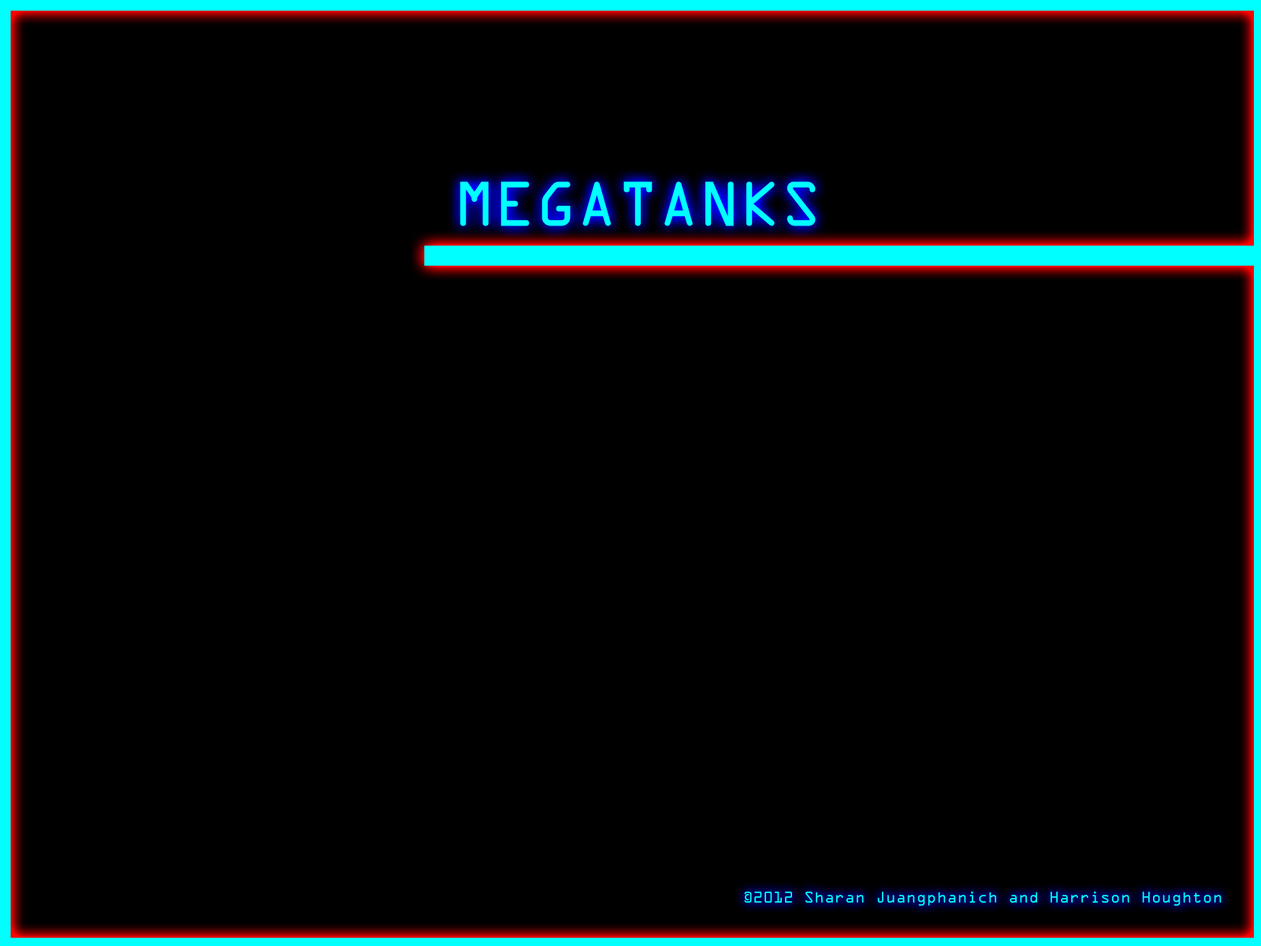
<style>
.page{position:relative;width:1261px;height:946px;background:#000000}
.page>*{position:absolute;margin:0}
.t1{font:56.7px "OCRAStd";color:#00ffff}
.t2{font:14.2px "OCRAStd";color:#00ffff}
</style>
<div class="page">
<p class="t1" style="left:460px;top:181px;width:356px;height:45px">MEGATANKS</p>
<p class="t2" style="left:744px;top:891px;width:478px;height:14px">©2012 Sharan Juangphanich and Harrison Houghton</p>
</div>
